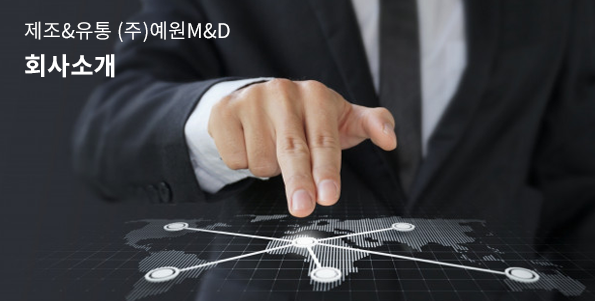
<style>
.page{position:relative;width:595px;height:301px}
.page>*{position:absolute;margin:0}
.t1{font:20px/37px "NotoSansCJKkr-Regular";letter-spacing:0.01em;color:#ffffff}
.t2{font:25px/37px "NotoSansCJKkr-Bold";letter-spacing:0.01em;color:#ffffff}
</style>
<div class="page">
<p class="t1" style="left:24px;top:21px;width:206px;height:57px">제조&amp;유통 (주)예원M&amp;D<br><span class="t2">회사소개</span></p>
</div>
